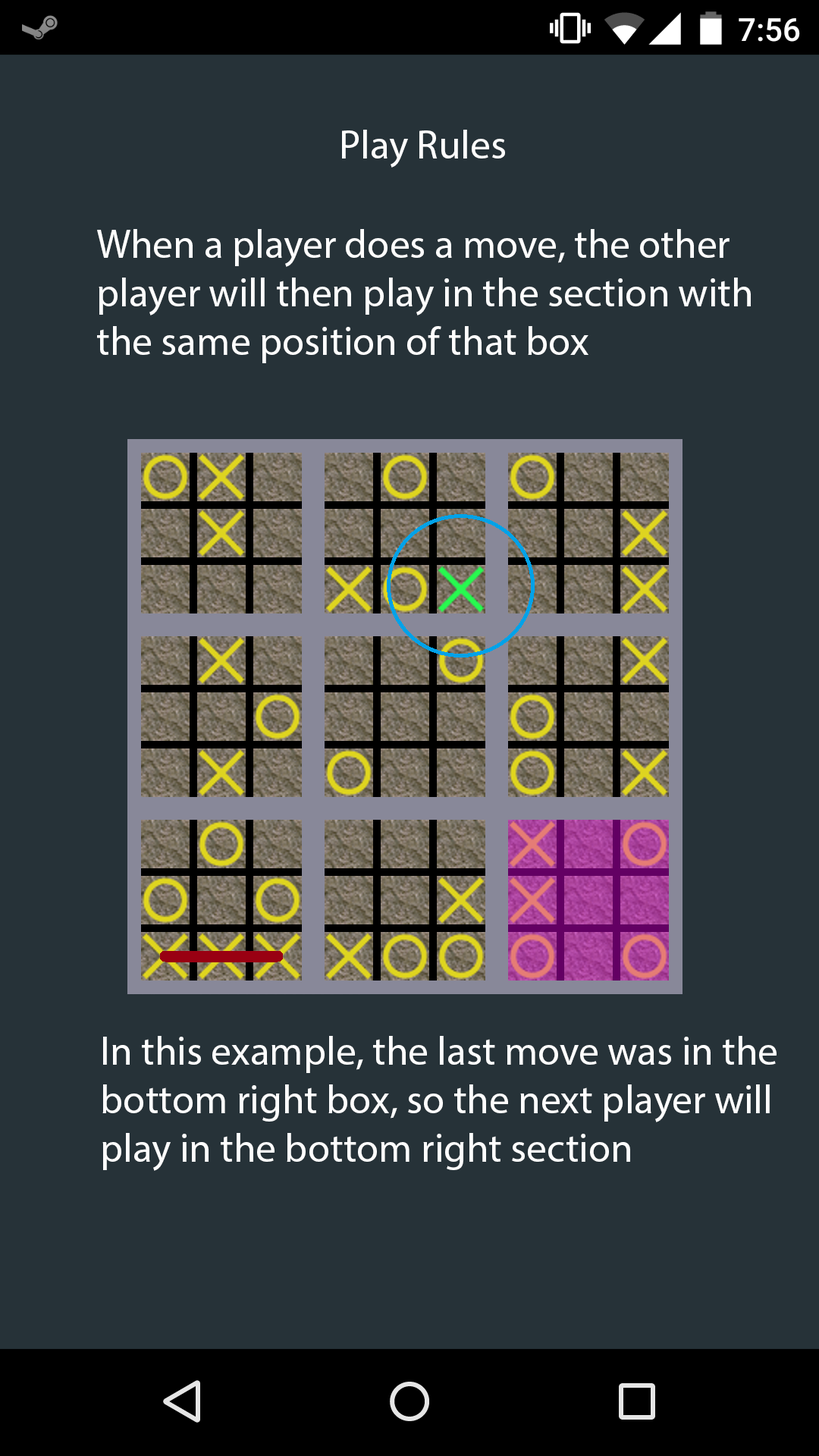
<style>
.page{position:relative;width:819px;height:1456px;background:#263238}
.page>*{position:absolute;margin:0}
.t1{font:40.4px "MyriadPro-Regular";color:#fefefe}
</style>
<div class="page">
<p class="t1" style="left:342px;top:130px;width:163px;height:38px">Play Rules</p>
<p class="t1" style="left:97px;top:229px;width:654px;height:134px">When a player does a move, the other <br>player will then play in the section with<br>the same position of that box</p>
<p class="t1" style="left:102px;top:1036px;width:675px;height:135px">In this example, the last move was in the<br>bottom right box, so the next player will<br>play in the bottom right section</p>
</div>
